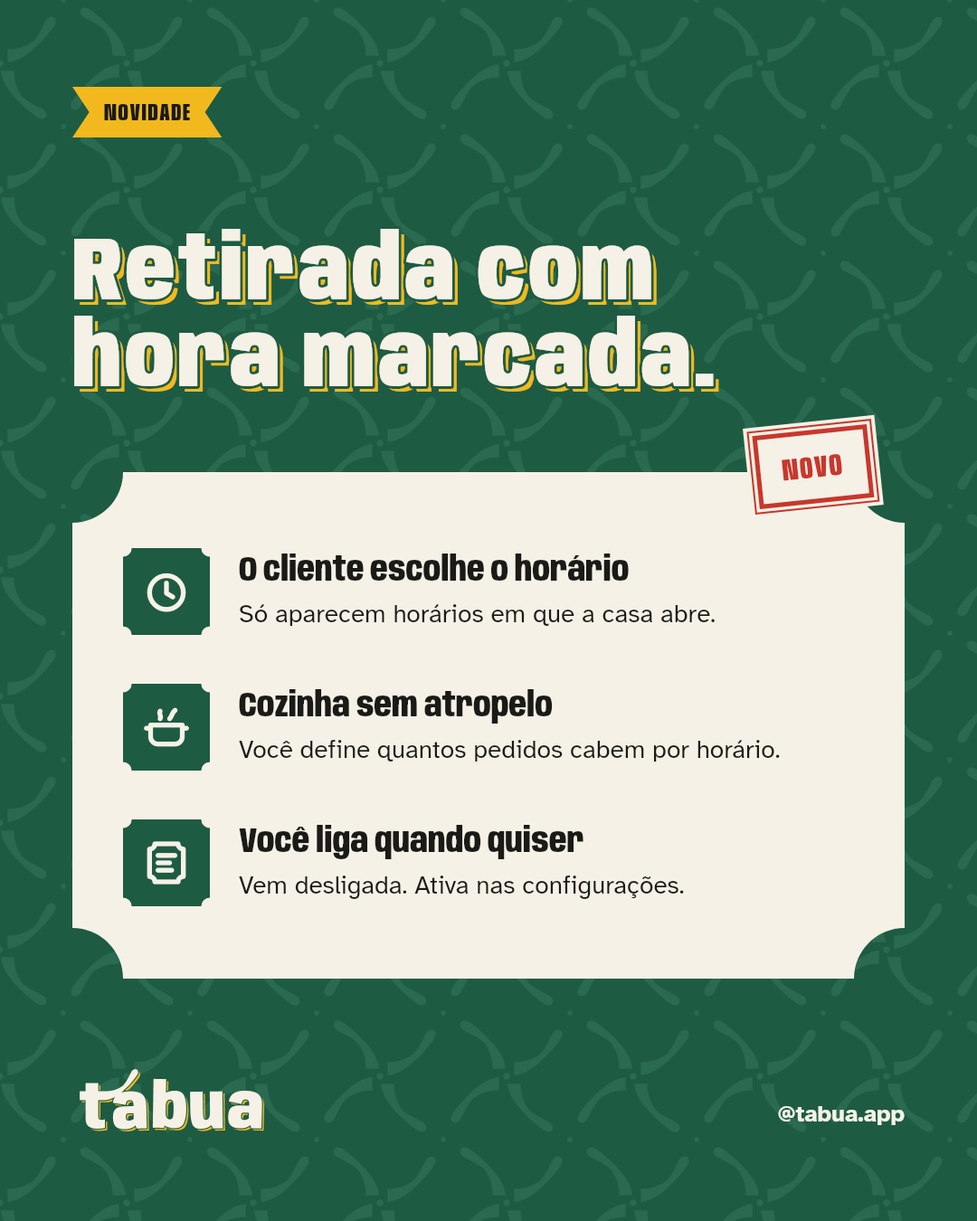
<style>
.page{position:relative;width:977px;height:1221px;background:#1e5b43}
.page>*{position:absolute;margin:0}
.t1{font:24.4px "Anybody-ExtraBold-W60";letter-spacing:0.06em;color:#1a1a17}
.t2{font:90.4px/86.8px "Anybody-Black-W75";letter-spacing:0.034em;color:#f6f1e6}
.t3{font:90.4px/86.8px "Anybody-Black-W75";letter-spacing:0.034em}
.t4{font:30.7px "Anybody-ExtraBold-W60";letter-spacing:0.06em;color:#c8372d}
.t5{font:34.4px "Anybody-ExtraBold-W75";color:#1a1a17}
.t6{font:25.3px "AtkinsonHyperlegible-Regular";color:#1a1a17}
.t7{font:23.5px "AtkinsonHyperlegible-Bold";color:#f6f1e6}
</style>
<div class="page">
<p class="t1" style="left:104px;top:104px;width:86px;height:16px">NOVIDADE</p>
<p class="t2" style="left:71px;top:226px;width:645px;height:163px">Retirada com<br>hora marcada.</p>
<p class="t3" style="left:80px;top:234px;width:639px;height:158px">Retirada com<br>hora marcada.</p>
<p class="t4" style="left:781px;top:454px;width:61px;height:27px;rotate:-6deg">NOVO</p>
<p class="t5" style="left:239px;top:553px;width:390px;height:28px">O cliente escolhe o horário</p>
<p class="t6" style="left:240px;top:604px;width:474px;height:22px">Só aparecem horários em que a casa abre.</p>
<p class="t5" style="left:239px;top:689px;width:314px;height:34px">Cozinha sem atropelo</p>
<p class="t6" style="left:239px;top:740px;width:541px;height:21px">Você define quantos pedidos cabem por horário.</p>
<p class="t5" style="left:239px;top:825px;width:344px;height:34px">Você liga quando quiser</p>
<p class="t6" style="left:239px;top:875px;width:445px;height:24px">Vem desligada. Ativa nas configurações.</p>
<p class="t7" style="left:778px;top:1106px;width:126px;height:19px">@tabua.app</p>
</div>
